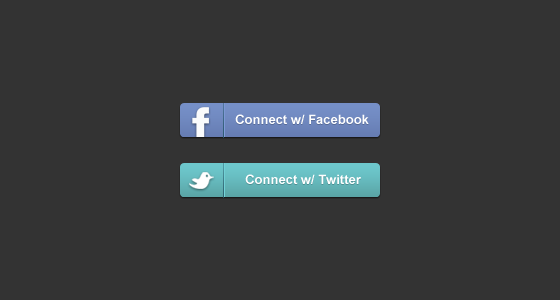
<style>
.page{position:relative;width:560px;height:300px;background:#333333}
.page>*{position:absolute;margin:0}
.t1{font:13px "Arial-BoldMT";color:#ffffff}
</style>
<div class="page">
<p class="t1" style="left:235px;top:114px;width:134px;height:10px">Connect w/ Facebook</p>
<p class="t1" style="left:245px;top:174px;width:116px;height:10px">Connect w/ Twitter</p>
</div>
